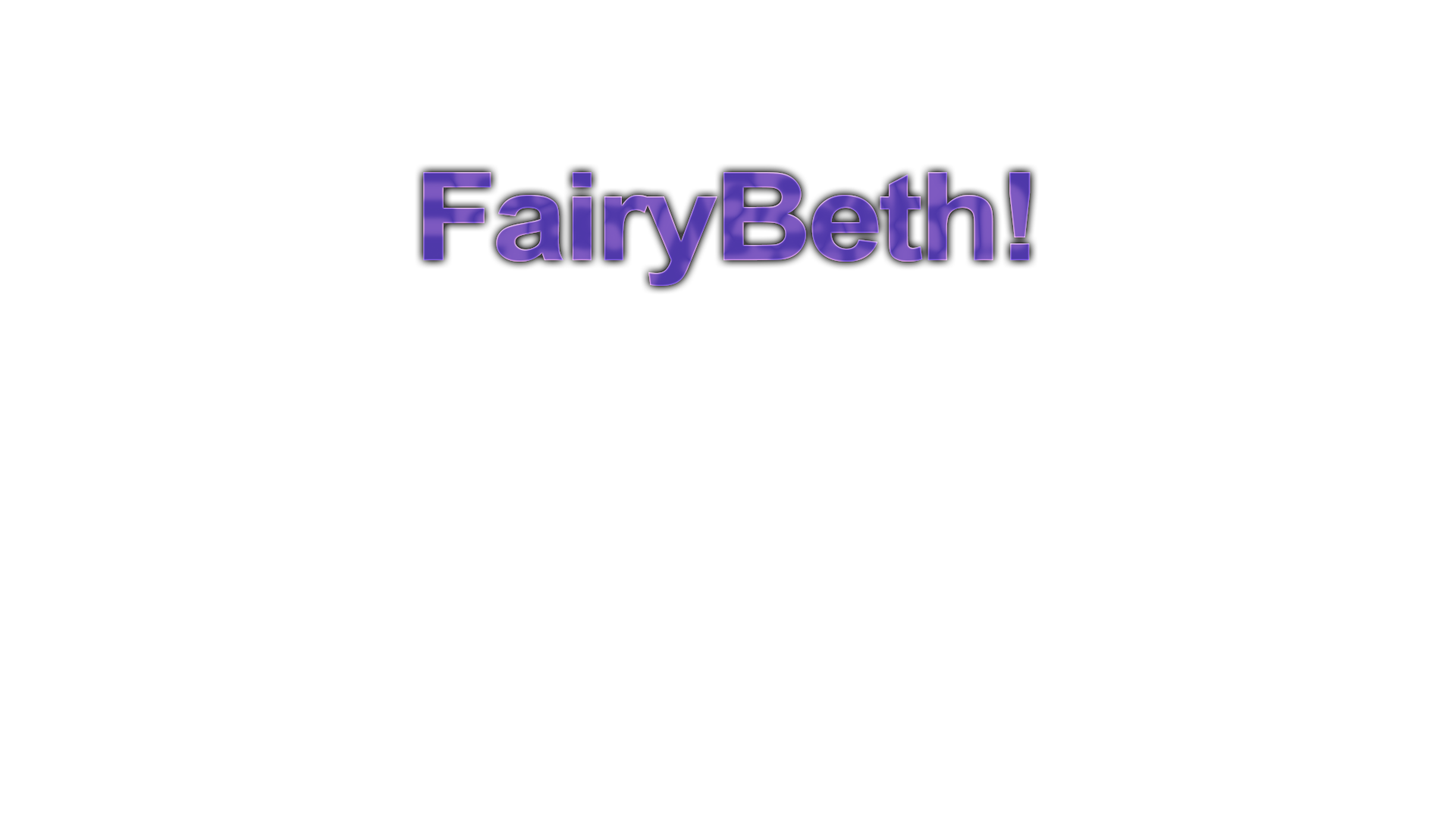
<style>
.page{position:relative;width:1456px;height:819px;background:#ffffff}
.page>*{position:absolute;margin:0}
.t1{font:121.7px "Arial-BoldMT";letter-spacing:-0.04em;scale:1.13 1}
</style>
<div class="page">
<p class="t1" style="left:423px;top:172px;width:608px;height:114px">FairyBeth!</p>
</div>
